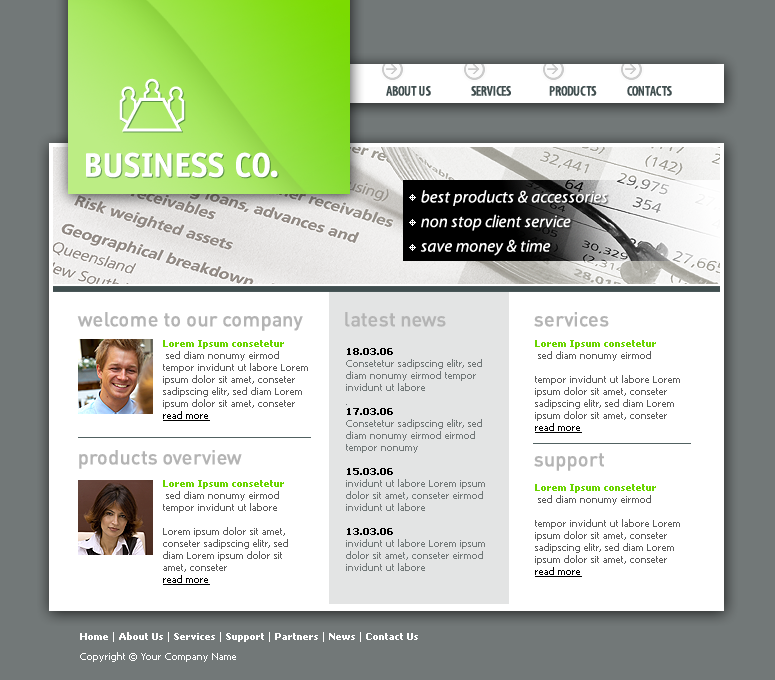
<style>
.page{position:relative;width:775px;height:680px;background:#ffffff}
.page>*{position:absolute;margin:0}
.t1{font:55px "MSOutlook";color:#ffffff;text-transform:uppercase}
.t2{font:14px "MyriadPro-SemiboldCond";color:#404e4f;text-transform:uppercase}
.t3{font:34px "OfficinaSansStd-Bold";color:#ffffff;text-transform:uppercase}
.t4{font:17px/24.6px "MyriadPro-It";color:#ffffff}
.t5{font:20px "DINCE-Medium";color:#b4b4b4}
.t6{font:10px "Tahoma";color:#5c5c5c}
.t7{font:10px "Tahoma-Bold";color:#6ad400}
.t8{font:10px "Tahoma";color:#000000;text-decoration:underline}
.t9{font:10px "Tahoma";color:#727878}
.t10{font:10px "Tahoma-Bold";color:#000000}
.t11{font:10px "Tahoma-Bold";color:#ffffff}
.t12{font:10px "Tahoma";color:#ffffff}
</style>
<div class="page">
<p class="t1" style="left:119px;top:78px;width:66px;height:54px">fs.</p>
<p class="t2" style="left:386px;top:86px;width:45px;height:10px">about us</p>
<p class="t2" style="left:471px;top:86px;width:40px;height:10px">services</p>
<p class="t2" style="left:549px;top:86px;width:48px;height:10px">products</p>
<p class="t2" style="left:627px;top:86px;width:45px;height:10px">contacts</p>
<p class="t3" style="left:86px;top:152px;width:192px;height:26px">business co.</p>
<p class="t4" style="left:420px;top:190px;width:188px;height:66px">best products &amp; accessories<br>non stop client service<br>save money &amp; time</p>
<p class="t5" style="left:77px;top:312px;width:226px;height:19px">welcome to our company</p>
<p class="t5" style="left:345px;top:312px;width:101px;height:15px">latest news</p>
<p class="t5" style="left:534px;top:312px;width:75px;height:15px">services</p>
<p class="t6" style="left:163px;top:340px;width:145px;height:81px"><span class="t7">Lorem Ipsum consetetur <br> </span>sed diam nonumy eirmod tempor invidunt ut labore Lorem ipsum dolor sit amet, conseter sadipscing elitr, sed diam Lorem ipsum dolor sit amet, conseter <br><span class="t8">read more</span></p>
<p class="t6" style="left:535px;top:340px;width:145px;height:93px"><span class="t7">Lorem Ipsum consetetur <br> </span>sed diam nonumy eirmod <br><br>tempor invidunt ut labore Lorem ipsum dolor sit amet, conseter sadipscing elitr, sed diam Lorem ipsum dolor sit amet, conseter <br><span class="t8">read more</span></p>
<p class="t9" style="left:346px;top:348px;width:139px;height:223px"><span class="t10">18.03.06<br></span>Consetetur sadipscing elitr, sed diam nonumy eirmod tempor invidunt ut labore <br><br><span class="t10">17.03.06<br></span>Consetetur sadipscing elitr, sed diam nonumy eirmod eirmod tempor nonumy <br><br><span class="t10">15.03.06<br></span>invidunt ut labore Lorem ipsum dolor sit amet, conseter eirmod <br>invidunt ut labore <br><br><span class="t10">13.03.06<br></span>invidunt ut labore Lorem ipsum dolor sit amet, conseter eirmod<br>invidunt ut labore</p>
<p class="t5" style="left:79px;top:450px;width:163px;height:19px">products overview</p>
<p class="t5" style="left:534px;top:453px;width:70px;height:18px">support</p>
<p class="t6" style="left:163px;top:480px;width:125px;height:105px"><span class="t7">Lorem Ipsum consetetur <br> </span>sed diam nonumy eirmod tempor invidunt ut labore <br><br>Lorem ipsum dolor sit amet, conseter sadipscing elitr, sed diam Lorem ipsum dolor sit amet, conseter <br><span class="t8">read more</span></p>
<p class="t6" style="left:535px;top:484px;width:145px;height:93px"><span class="t7">Lorem Ipsum consetetur <br> </span>sed diam nonumy eirmod <br><br>tempor invidunt ut labore Lorem ipsum dolor sit amet, conseter sadipscing elitr, sed diam Lorem ipsum dolor sit amet, conseter <br><span class="t8">read more</span></p>
<p class="t11" style="left:80px;top:632px;width:338px;height:10px"><span class="t12">  </span>Home <span class="t12">| </span>About Us <span class="t12">| </span>Services <span class="t12">| </span>Support <span class="t12">| </span>Partners <span class="t12">| </span>News <span class="t12">| </span>Contact Us</p>
<p class="t12" style="left:80px;top:652px;width:156px;height:10px">Copyright © Your Company Name</p>
</div>
